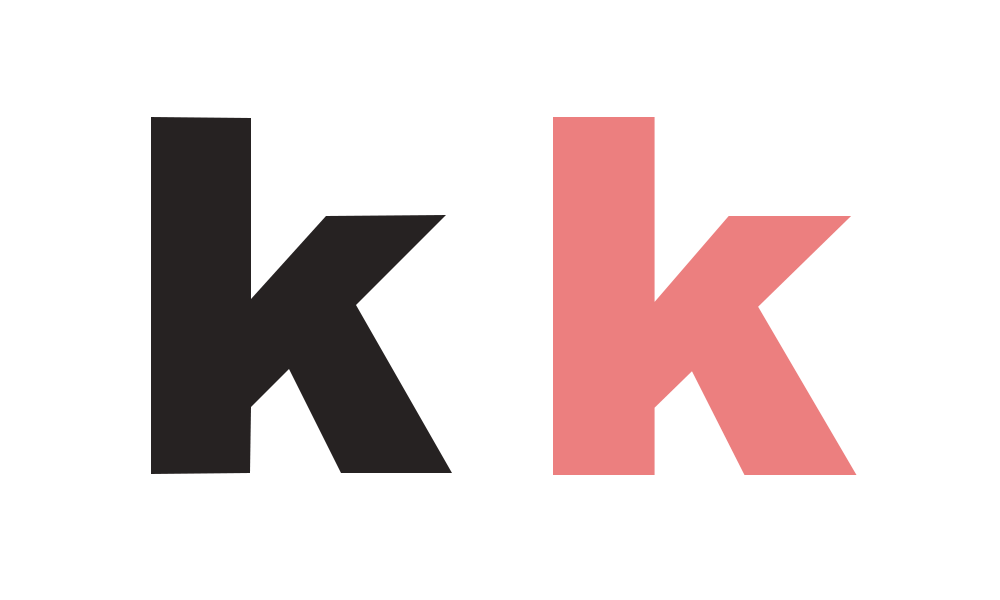
<style>
.page{position:relative;width:1000px;height:600px;background:#ffffff}
.page>*{position:absolute;margin:0}
.t1{font:500px "Arial-Black";color:#ec7f7f}
</style>
<div class="page">
<p class="t1" style="left:553px;top:117px;width:304px;height:358px">k</p>
</div>
